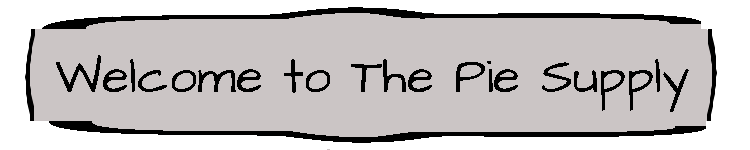
<style>
.page{position:relative;width:750px;height:150px;background:#cbc5c5}
.page>*{position:absolute;margin:0}
.t1{font:586.6px "ArchitectsDaughter-Regular";color:#000000;scale:0.1 1}
.t2{font:50px "ArchitectsDaughter-Regular";color:#000000}
.t3{font:586.3px "ArchitectsDaughter-Regular";color:#000000;scale:0.09 1}
</style>
<div class="page">
<p class="t1" style="left:42px;top:7px;width:659px;height:22px;rotate:90deg">{</p>
<p class="t2" style="left:56px;top:55px;width:633px;height:57px">Welcome to The Pie Supply</p>
<p class="t3" style="left:49px;top:121px;width:657px;height:22px;rotate:-90deg">{</p>
</div>
